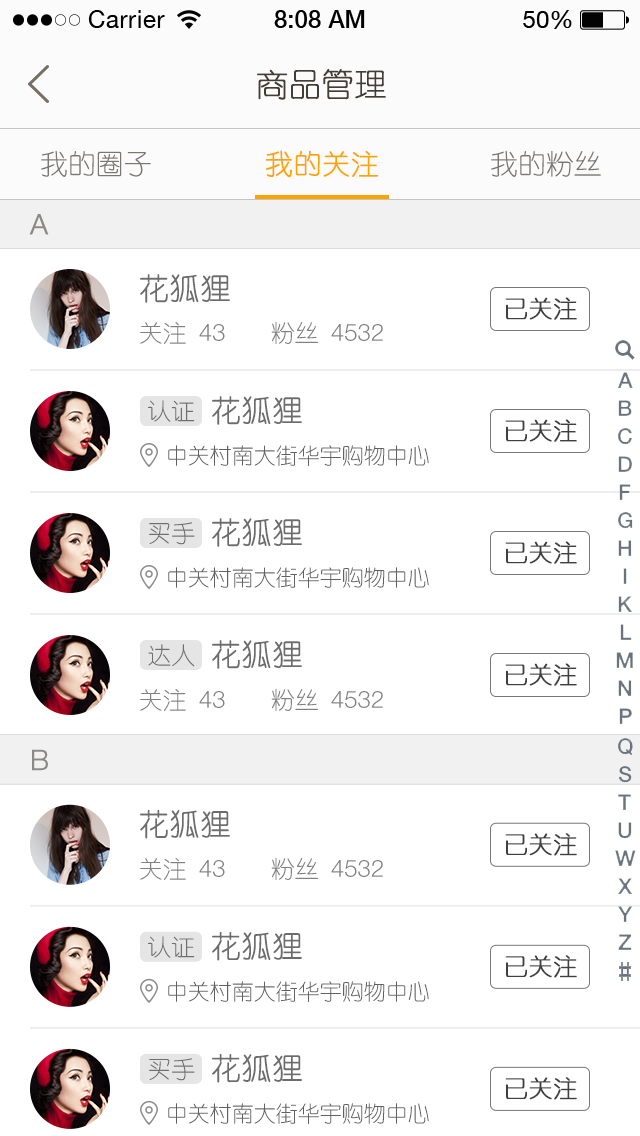
<style>
.page{position:relative;width:640px;height:1136px;background:#ffffff}
.page>*{position:absolute;margin:0}
.t1{font:32px "YouYuan";color:#433d33;text-transform:uppercase;font-weight:bold}
.t2{font:28px "YouYuan";color:#7a7772;text-transform:uppercase}
.t3{font:28px "YouYuan";color:#ffa300;text-transform:uppercase;font-weight:bold}
.t4{font:28px "HelveticaNeueLTPro-Lt";color:#8b8985;text-transform:uppercase;font-weight:bold}
.t5{font:30px "YouYuan";color:#555555;text-transform:uppercase;font-weight:bold}
.t6{font:24px "YouYuan";color:#3e3f3f;font-weight:bold}
.t7{font:24px "YouYuan";color:#818181;text-transform:uppercase}
.t8{font:24px "HelveticaNeueLTPro-Lt";color:#818181;text-transform:uppercase}
.t9{font:24px "YouYuan";color:#6e6e6e;text-transform:uppercase}
.t10{font:22px "YouYuan";color:#616161;text-transform:uppercase}
</style>
<div class="page">
<p class="t1" style="left:257px;top:69px;width:129px;height:31px">商品管理</p>
<p class="t2" style="left:41px;top:150px;width:110px;height:27px">我的圈子</p>
<p class="t3" style="left:265px;top:150px;width:114px;height:28px">我的关注</p>
<p class="t2" style="left:491px;top:150px;width:110px;height:27px">我的粉丝</p>
<p class="t4" style="left:29px;top:214px;width:20px;height:21px">A</p>
<p class="t5" style="left:140px;top:274px;width:90px;height:29px;opacity:0.9">花狐狸</p>
<p class="t6" style="left:505px;top:297px;width:72px;height:23px">已关注</p>
<p class="t7" style="left:140px;top:322px;width:85px;height:22px">关注 <span class="t8">43</span></p>
<p class="t8" style="left:271px;top:321px;width:112px;height:23px"><span class="t7">粉丝 </span>4532</p>
<p class="t9" style="left:148px;top:400px;width:47px;height:22px">认证</p>
<p class="t5" style="left:212px;top:396px;width:90px;height:29px;opacity:0.9">花狐狸</p>
<p class="t6" style="left:505px;top:419px;width:72px;height:23px">已关注</p>
<p class="t10" style="left:168px;top:445px;width:261px;height:21px">中关村南大街华宇购物中心</p>
<p class="t5" style="left:212px;top:518px;width:90px;height:29px;opacity:0.9">花狐狸</p>
<p class="t9" style="left:149px;top:522px;width:46px;height:23px">买手</p>
<p class="t6" style="left:505px;top:541px;width:72px;height:23px">已关注</p>
<p class="t10" style="left:168px;top:567px;width:261px;height:21px">中关村南大街华宇购物中心</p>
<p class="t5" style="left:212px;top:640px;width:90px;height:29px;opacity:0.9">花狐狸</p>
<p class="t9" style="left:148px;top:644px;width:47px;height:23px">达人</p>
<p class="t6" style="left:505px;top:663px;width:72px;height:23px">已关注</p>
<p class="t7" style="left:140px;top:689px;width:85px;height:22px">关注 <span class="t8">43</span></p>
<p class="t8" style="left:271px;top:688px;width:112px;height:23px"><span class="t7">粉丝 </span>4532</p>
<p class="t4" style="left:32px;top:749px;width:16px;height:22px">b</p>
<p class="t5" style="left:140px;top:809px;width:90px;height:30px;opacity:0.9">花狐狸</p>
<p class="t6" style="left:505px;top:833px;width:72px;height:23px">已关注</p>
<p class="t8" style="left:271px;top:857px;width:112px;height:23px"><span class="t7">粉丝 </span>4532</p>
<p class="t7" style="left:140px;top:858px;width:85px;height:22px">关注 <span class="t8">43</span></p>
<p class="t9" style="left:148px;top:936px;width:47px;height:22px">认证</p>
<p class="t5" style="left:212px;top:932px;width:90px;height:29px;opacity:0.9">花狐狸</p>
<p class="t6" style="left:505px;top:955px;width:72px;height:23px">已关注</p>
<p class="t10" style="left:168px;top:981px;width:261px;height:21px">中关村南大街华宇购物中心</p>
<p class="t9" style="left:149px;top:1058px;width:46px;height:23px">买手</p>
<p class="t5" style="left:212px;top:1054px;width:90px;height:29px;opacity:0.9">花狐狸</p>
<p class="t6" style="left:505px;top:1077px;width:72px;height:23px">已关注</p>
<p class="t10" style="left:168px;top:1103px;width:261px;height:21px">中关村南大街华宇购物中心</p>
</div>
